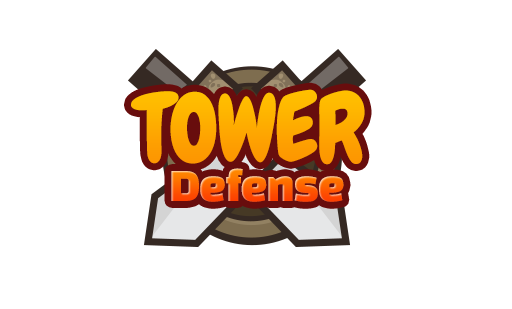
<style>
.page{position:relative;width:512px;height:309px;background:#ffffff}
.page>*{position:absolute;margin:0}
.t1{font:94.2px "Chewy";letter-spacing:-0.025em;color:#feac00}
.t2{font:48px "ChangaOne";letter-spacing:-0.025em}
</style>
<div class="page">
<p class="t1" style="left:131px;top:89px;width:234px;height:76px">TOWER</p>
<p class="t2" style="left:171px;top:168px;width:173px;height:34px">Defense</p>
</div>
